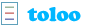
<style>
.page{position:relative;width:100px;height:27px;background:#ffffff}
.page>*{position:absolute;margin:0}
.t1{font:20px "CooperBlackStd";letter-spacing:-0.025em;color:#00b6ff}
</style>
<div class="page">
<p class="t1" style="left:27px;top:7px;width:54px;height:15px">toloo</p>
</div>
